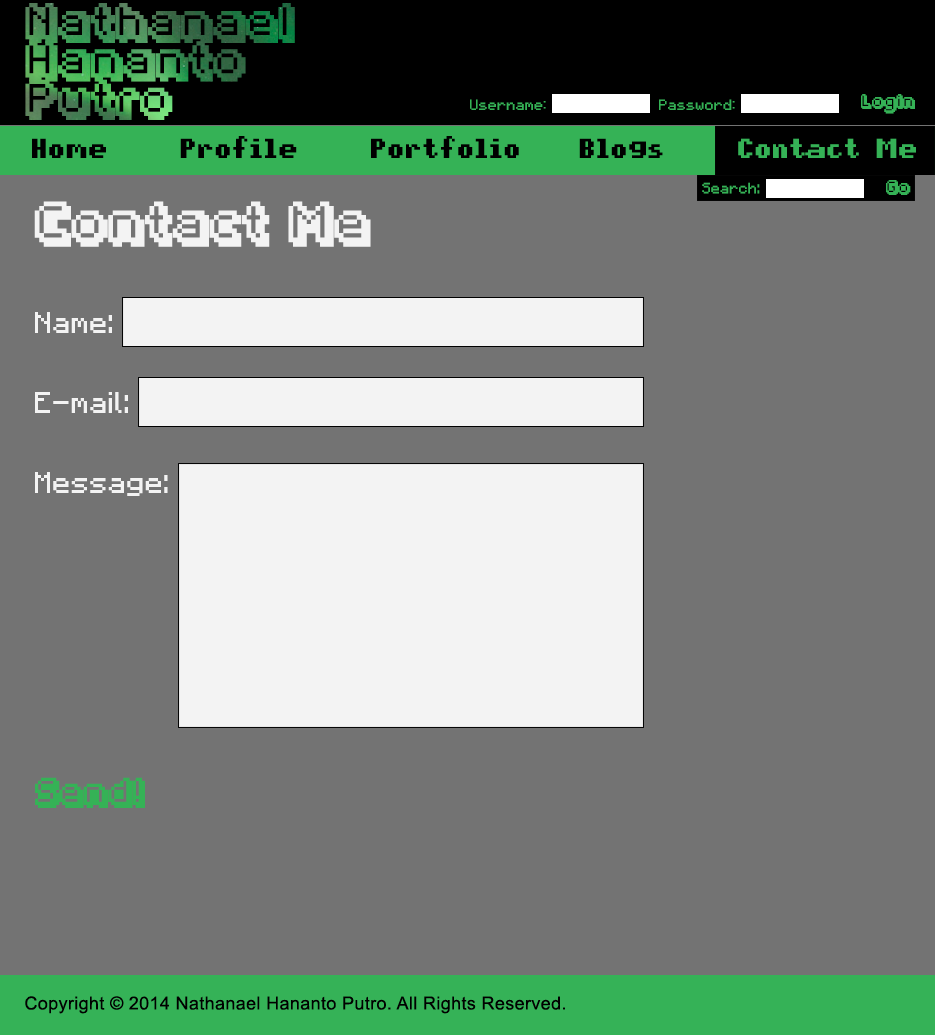
<style>
.page{position:relative;width:935px;height:1035px;background:#737373}
.page>*{position:absolute;margin:0}
.t1{font:32px "Fipps-Regular";letter-spacing:0.02em}
.t2{font:12px "pixelmix";letter-spacing:0.02em;color:#35b256}
.t3{font:12px "Fipps-Regular";letter-spacing:0.02em;color:#35b256}
.t4{font:22px "pixelmix-bold";letter-spacing:0.02em;color:#000000}
.t5{font:22px "pixelmix-bold";letter-spacing:0.02em;color:#35b256}
.t6{font:12px "Minecraftia";letter-spacing:0.02em;color:#35b256}
.t7{font:36px "Fipps-Regular";letter-spacing:0.02em;color:#f3f3f3}
.t8{font:24px "Minecraftia";letter-spacing:0.02em;color:#f3f3f3}
.t9{font:24px "Fipps-Regular";letter-spacing:0.02em;color:#35b256}
.t10{font:18px "ArialMT";letter-spacing:0.02em;color:#000000}
</style>
<div class="page">
<p class="t1" style="left:25px;top:3px;width:270px;height:117px">Nathanael<br>Hananto<br>Putro</p>
<p class="t2" style="left:470px;top:99px;width:76px;height:11px">Username:</p>
<p class="t2" style="left:659px;top:99px;width:76px;height:11px">Password:</p>
<p class="t3" style="left:861px;top:94px;width:54px;height:20px">Login</p>
<p class="t4" style="left:32px;top:136px;width:884px;height:22px">Home     Profile     Portfolio    Blogs     <span class="t5">Contact Me</span></p>
<p class="t6" style="left:702px;top:182px;width:58px;height:12px">Search:</p>
<p class="t3" style="left:886px;top:180px;width:25px;height:15px">Go</p>
<p class="t7" style="left:34px;top:201px;width:337px;height:46px">Contact Me</p>
<p class="t8" style="left:35px;top:312px;width:77px;height:21px">Name:</p>
<p class="t8" style="left:35px;top:392px;width:93px;height:21px">E-mail:</p>
<p class="t8" style="left:35px;top:472px;width:133px;height:24px">Message:</p>
<p class="t9" style="left:35px;top:777px;width:110px;height:31px">Send!</p>
<p class="t10" style="left:25px;top:996px;width:540px;height:18px">Copyright © 2014 Nathanael Hananto Putro. All Rights Reserved.</p>
</div>
